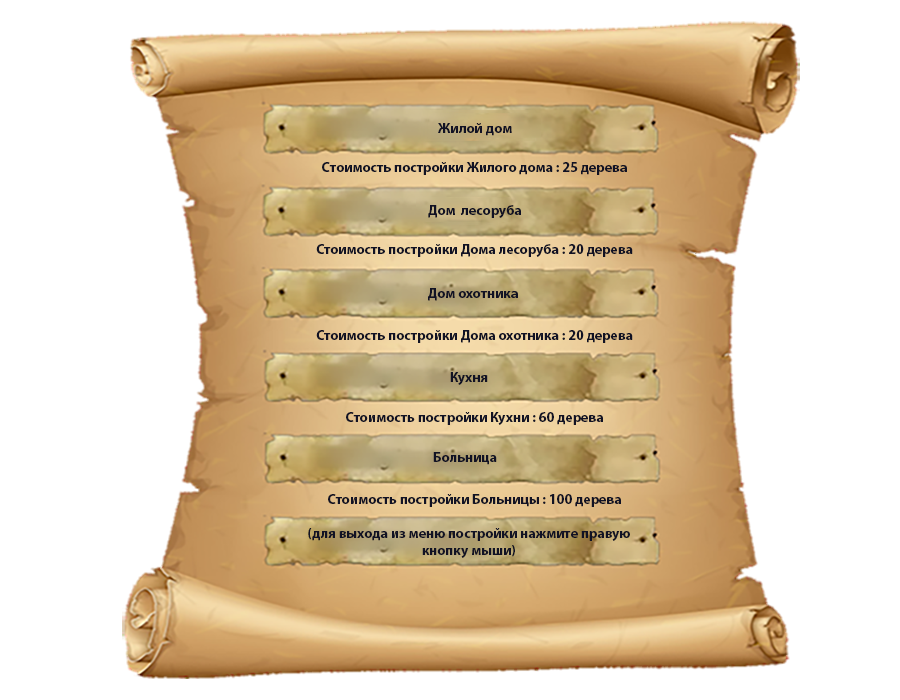
<style>
.page{position:relative;width:900px;height:700px;background:#ffffff}
.page>*{position:absolute;margin:0}
.t1{font:14px "MyriadPro-Bold";color:#111224}
</style>
<div class="page">
<p class="t1" style="left:322px;top:162px;width:305px;height:13px">Стоимость постройки Жилого дома : 25 дерева</p>
<p class="t1" style="left:316px;top:244px;width:317px;height:13px">Стоимость постройки Дома лесоруба : 20 дерева</p>
<p class="t1" style="left:316px;top:330px;width:317px;height:13px">Стоимость постройки Дома охотника : 20 дерева</p>
<p class="t1" style="left:346px;top:412px;width:257px;height:13px">Стоимость постройки Кухни : 60 дерева</p>
<p class="t1" style="left:328px;top:494px;width:293px;height:13px">Стоимость постройки Больницы : 100 дерева</p>
</div>
